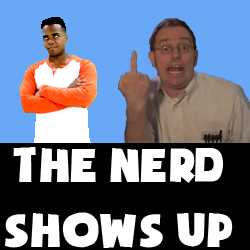
<style>
.page{position:relative;width:250px;height:250px;background:#69a8f7}
.page>*{position:absolute;margin:0}
.t1{font:53.6px "SoupofJustice";color:#ffffff}
</style>
<div class="page">
<p class="t1" style="left:5px;top:147px;width:228px;height:101px;text-align:center">The nerD<br>Shows up</p>
</div>
